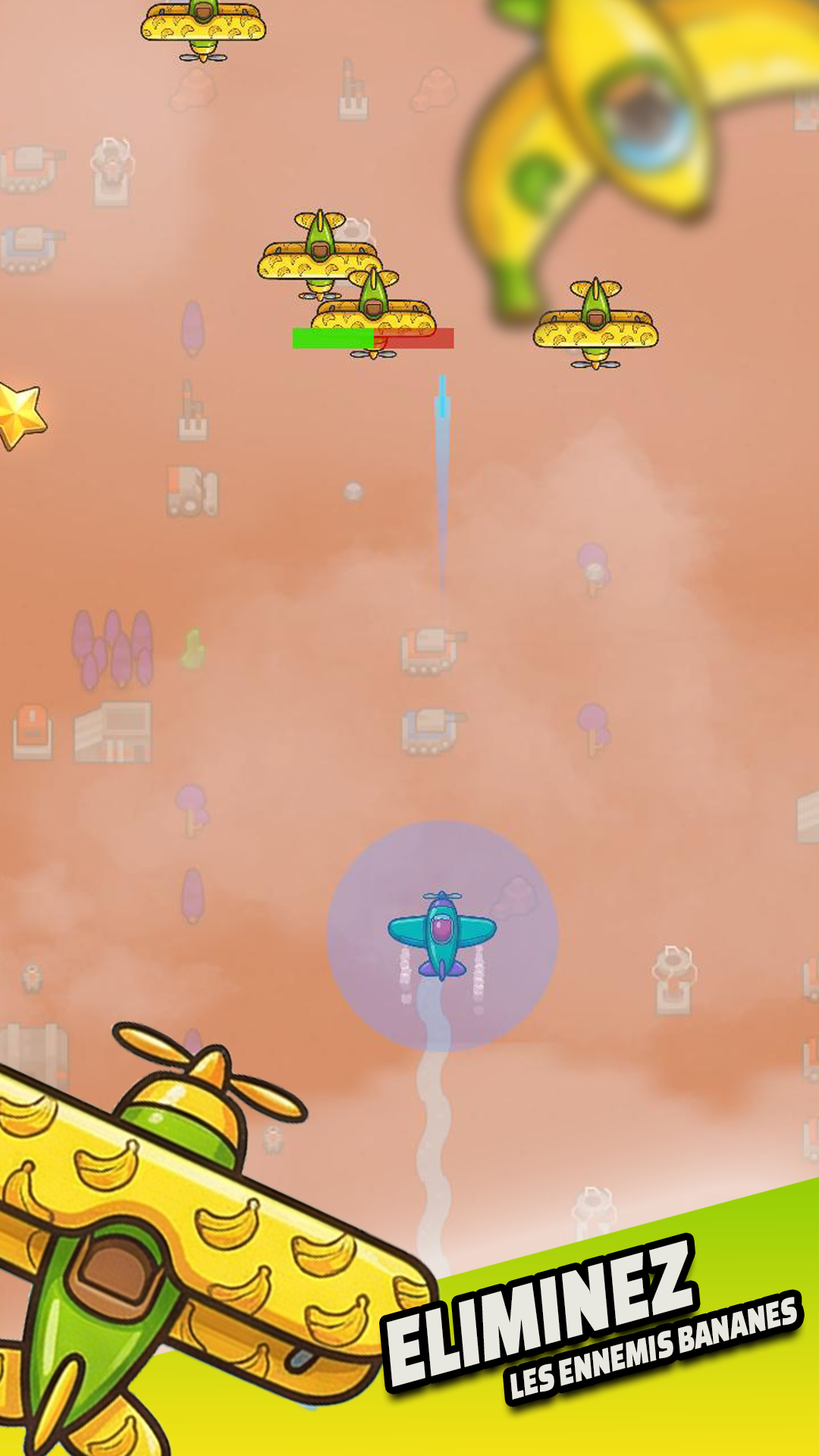
<style>
.page{position:relative;width:819px;height:1456px}
.page>*{position:absolute;margin:0}
.t1{font:103.2px "ChangaOne";color:#e8e8e0;scale:0.74 1}
.t2{font:39.8px "ChangaOne";color:#e8e8e0;scale:0.74 1}
</style>
<div class="page">
<p class="t1" style="left:387px;top:1240px;width:306px;height:147px;rotate:-15deg">ELIMINEZ</p>
<p class="t2" style="left:510px;top:1297px;width:287px;height:103px;rotate:-15deg">LES ENNEMIS BANANES</p>
</div>
